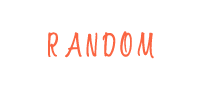
<style>
.page{position:relative;width:200px;height:100px;background:#ffffff}
.page>*{position:absolute;margin:0}
.t1{font:29px "VarianeScript";letter-spacing:0.235em;color:#fb6542;scale:0.8 1}
</style>
<div class="page">
<p class="t1" style="left:48px;top:31px;width:106px;height:28px">RANDOM</p>
</div>
